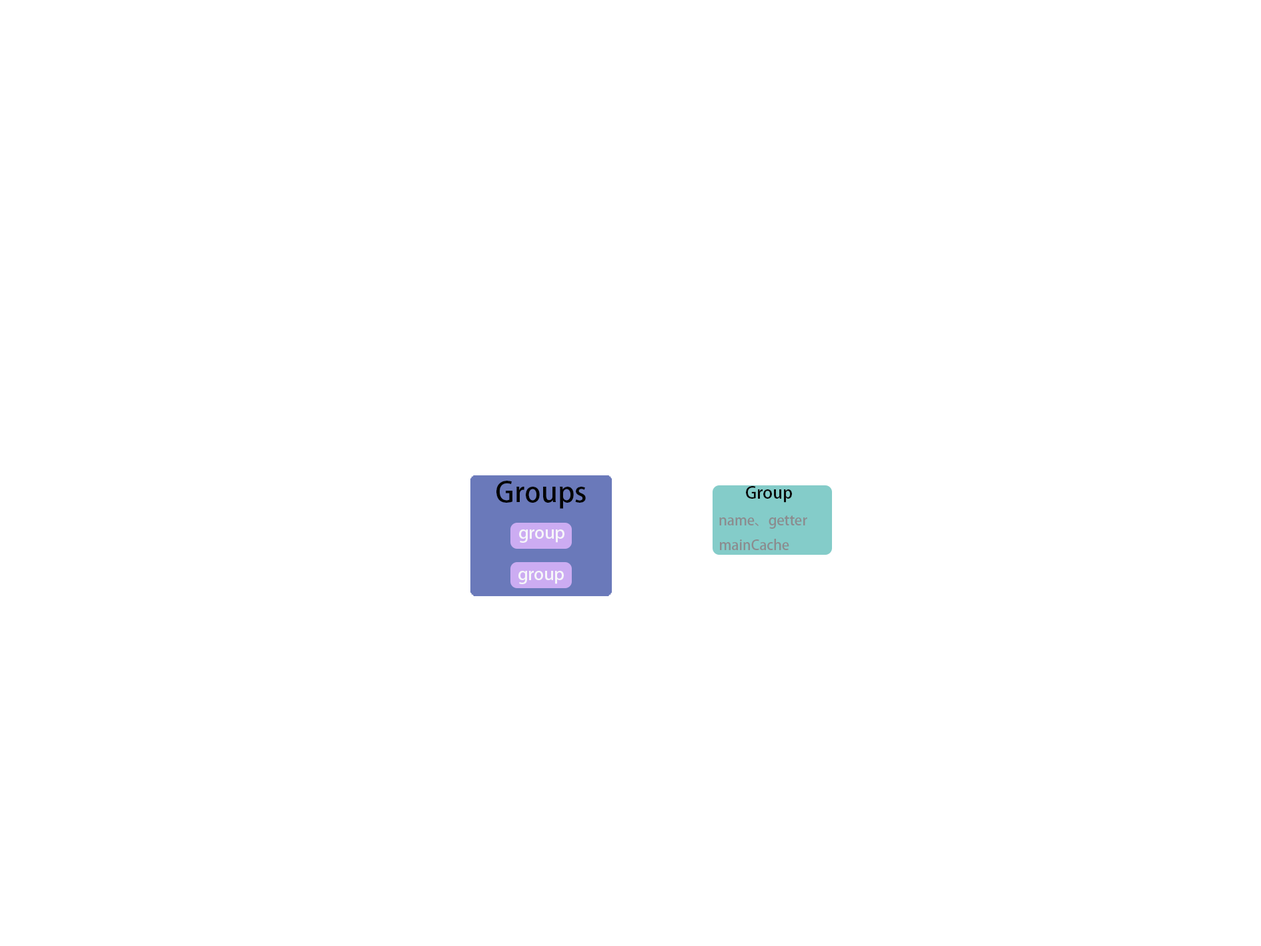
<style>
.page{position:relative;width:1261px;height:946px;background:#ffffff}
.page>*{position:absolute;margin:0}
.t1{font:27.8px "AdobeHeitiStd-Regular";color:#040404}
.t2{font:13.9px "AdobeHeitiStd-Regular";color:#8b8c8f}
.t3{font:16.7px "AdobeHeitiStd-Regular";color:#0a0a0a}
.t4{font:16.7px "AdobeHeitiStd-Regular";color:#f6f7f9}
</style>
<div class="page">
<p class="t1" style="left:496px;top:480px;width:90px;height:28px">Groups</p>
<p class="t2" style="left:719px;top:486px;width:88px;height:64px"><span class="t3">        Group         <br></span>  ｎame、getter<br>  mainCache</p>
<p class="t4" style="left:519px;top:529px;width:46px;height:13px">group</p>
<p class="t4" style="left:518px;top:571px;width:46px;height:13px">group</p>
</div>
